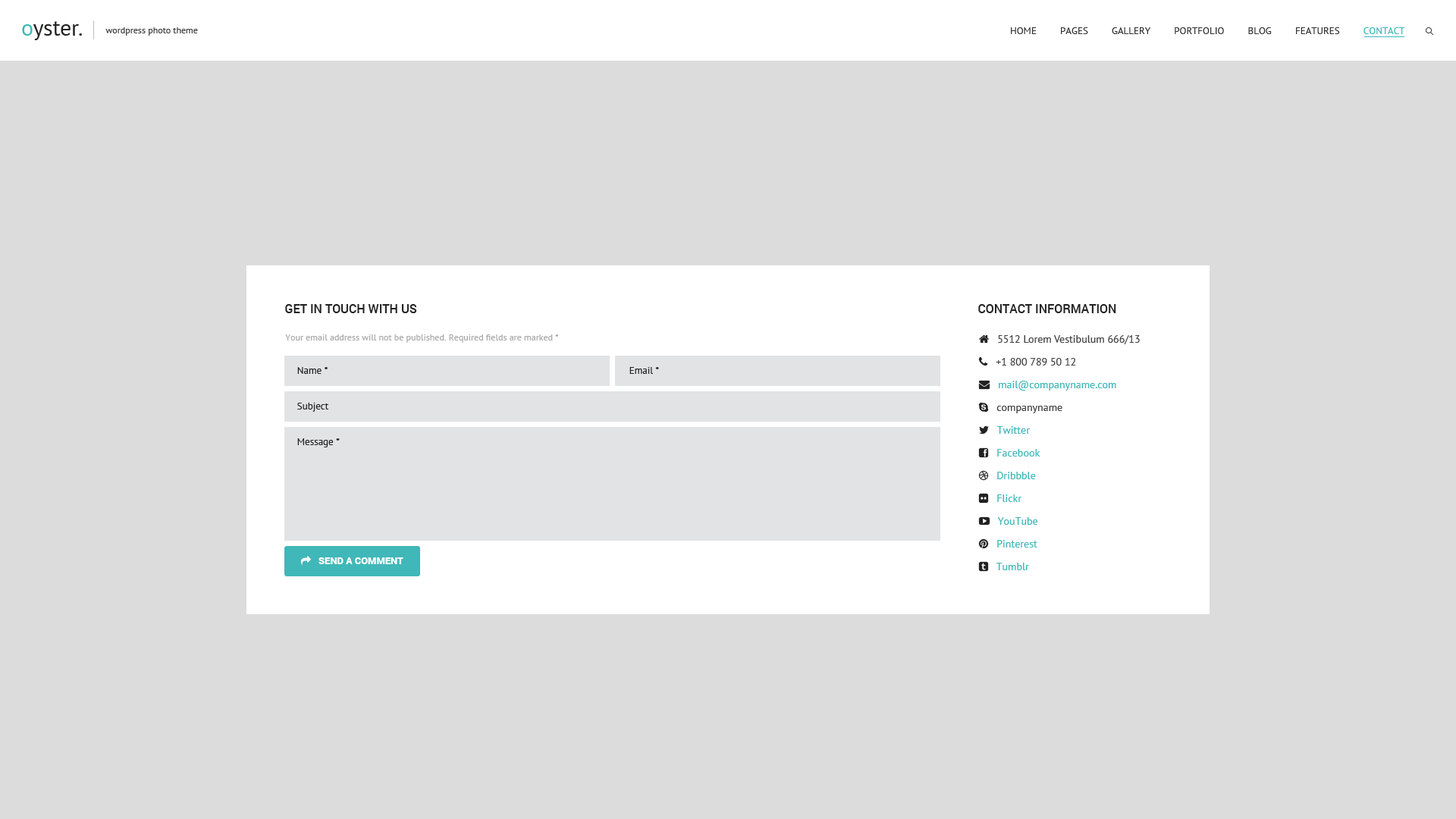
<style>
.page{position:relative;width:1456px;height:819px;background:#dcdcdc}
.page>*{position:absolute;margin:0}
.t1{font:9.1px "PTSans-Regular";color:#434343}
.t2{font:9.9px "PTSans-Regular";color:#343434;text-transform:uppercase}
.t3{font:9.9px "PTSans-Regular";color:#40b7b8;text-transform:uppercase}
.t4{font:12.1px "Roboto-Medium";color:#222222;text-transform:uppercase}
.t5{font:9.1px "PTSans-Regular";color:#aaaaaa}
.t6{font:9.9px "PTSans-Regular";color:#222222}
</style>
<div class="page">
<p class="t1" style="left:105px;top:27px;width:93px;height:9px">wordpress photo theme</p>
<p class="t2" style="left:1011px;top:27px;width:394px;height:7px">Home         Pages         Gallery         Portfolio         Blog         Features         <span class="t3">Contact</span></p>
<p class="t4" style="left:285px;top:304px;width:132px;height:9px">Get in Touch with Us</p>
<p class="t4" style="left:978px;top:304px;width:138px;height:9px">Contact Information</p>
<p class="t5" style="left:285px;top:334px;width:274px;height:9px">Your email address will not be published. Required fields are marked *</p>
<p class="t6" style="left:297px;top:367px;width:31px;height:7px">Name *</p>
<p class="t6" style="left:629px;top:367px;width:30px;height:7px">Email *</p>
<p class="t6" style="left:297px;top:403px;width:32px;height:9px">Subject</p>
<p class="t6" style="left:297px;top:438px;width:43px;height:9px">Message *</p>
</div>
